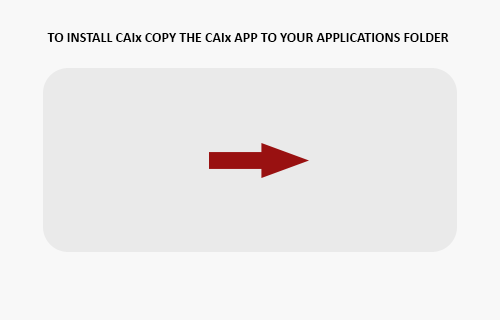
<style>
.page{position:relative;width:500px;height:320px;background:#f8f8f8}
.page>*{position:absolute;margin:0}
.t1{font:14px "Calibri-Bold";color:#000000}
</style>
<div class="page">
<p class="t1" style="left:47px;top:33px;width:402px;height:9px">TO INSTALL CAIx COPY THE CAIx APP TO YOUR APPLICATIONS FOLDER</p>
</div>
